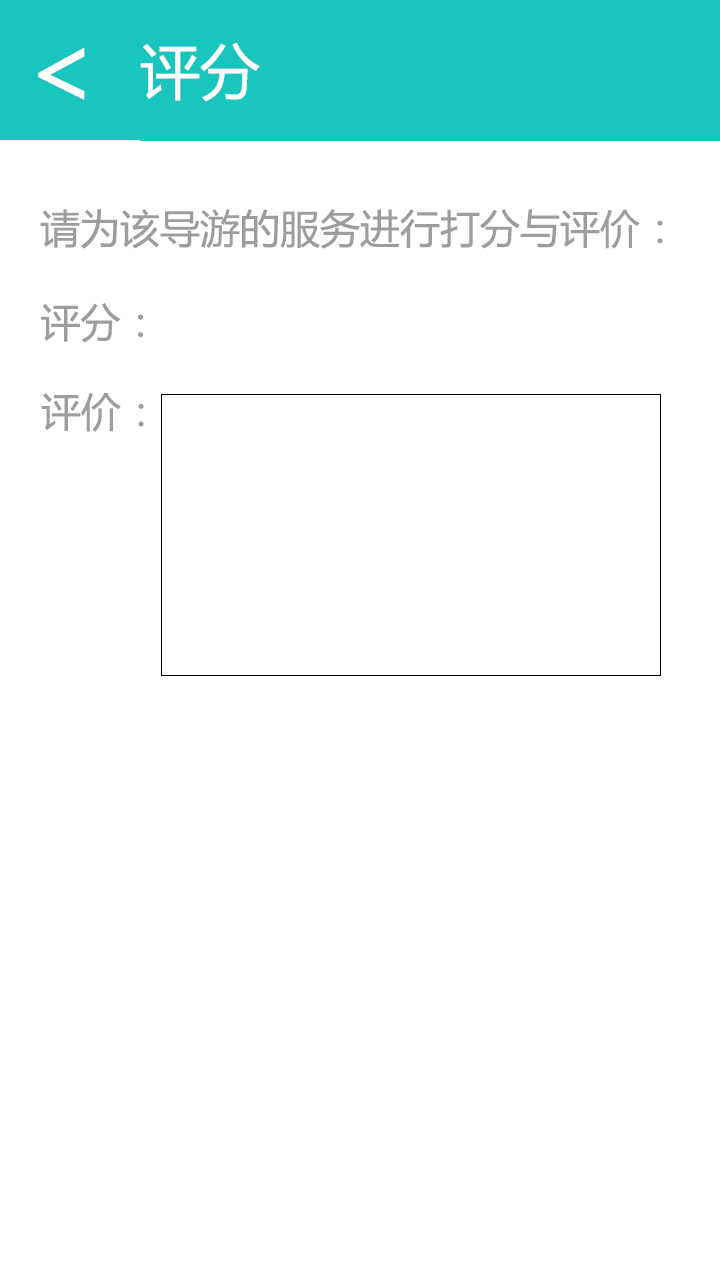
<style>
.page{position:relative;width:720px;height:1280px;background:#ffffff}
.page>*{position:absolute;margin:0}
.t1{font:60px "MicrosoftYaHei";color:#ffffff}
.t2{font:40px "MicrosoftYaHei";color:#9d9d9d}
</style>
<div class="page">
<p class="t1" style="left:140px;top:42px;width:120px;height:60px">评分</p>
<p class="t2" style="left:40px;top:209px;width:623px;height:40px">请为该导游的服务进行打分与评价：</p>
<p class="t2" style="left:41px;top:303px;width:103px;height:40px">评分：</p>
<p class="t2" style="left:41px;top:393px;width:103px;height:39px">评价：</p>
</div>
